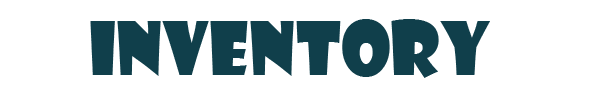
<style>
.page{position:relative;width:600px;height:100px;background:#ffffff}
.page>*{position:absolute;margin:0}
.t1{font:72px "ShowcardGothic-Reg";color:#103f4b}
</style>
<div class="page">
<p class="t1" style="left:90px;top:19px;width:400px;height:59px">inventory</p>
</div>
